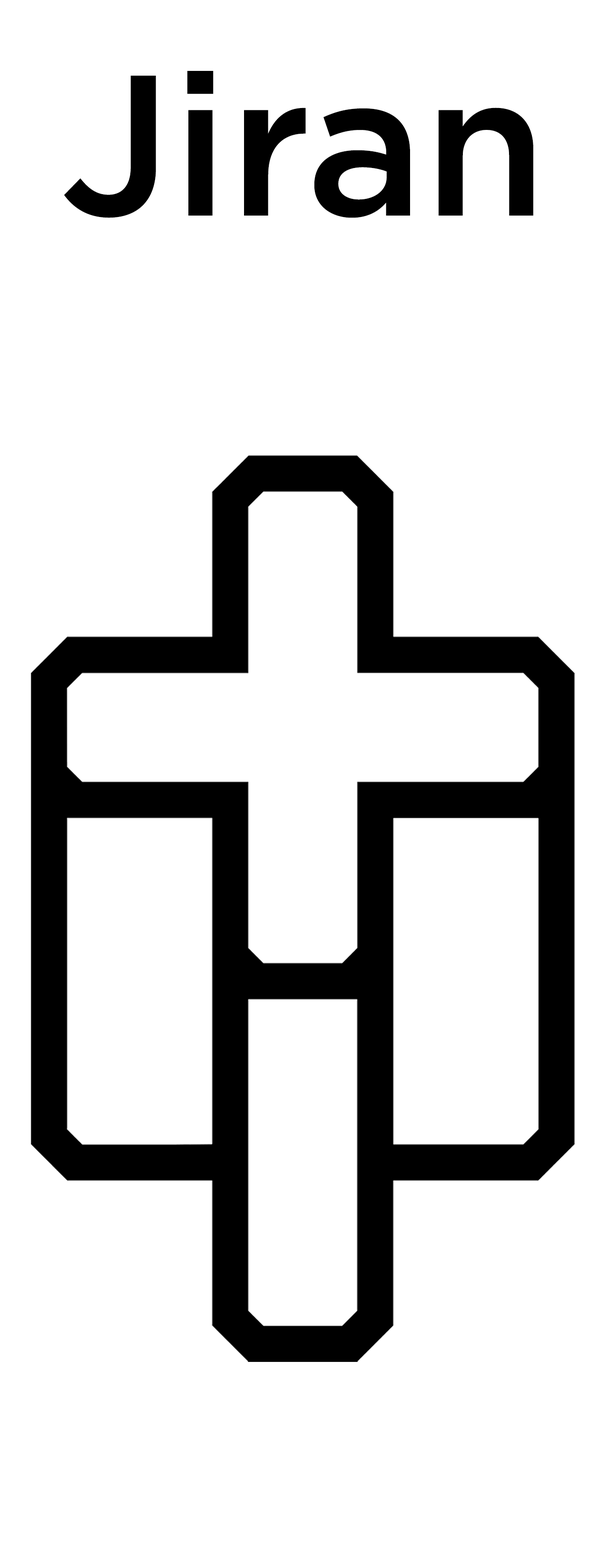
<style>
.page{position:relative;width:607px;height:1568px;background:#ffffff}
.page>*{position:absolute;margin:0}
.t1{font:199.9px "Gotham-Medium";color:#000000}
</style>
<div class="page">
<p class="t1" style="left:64px;top:71px;width:469px;height:147px">Jiran</p>
</div>
